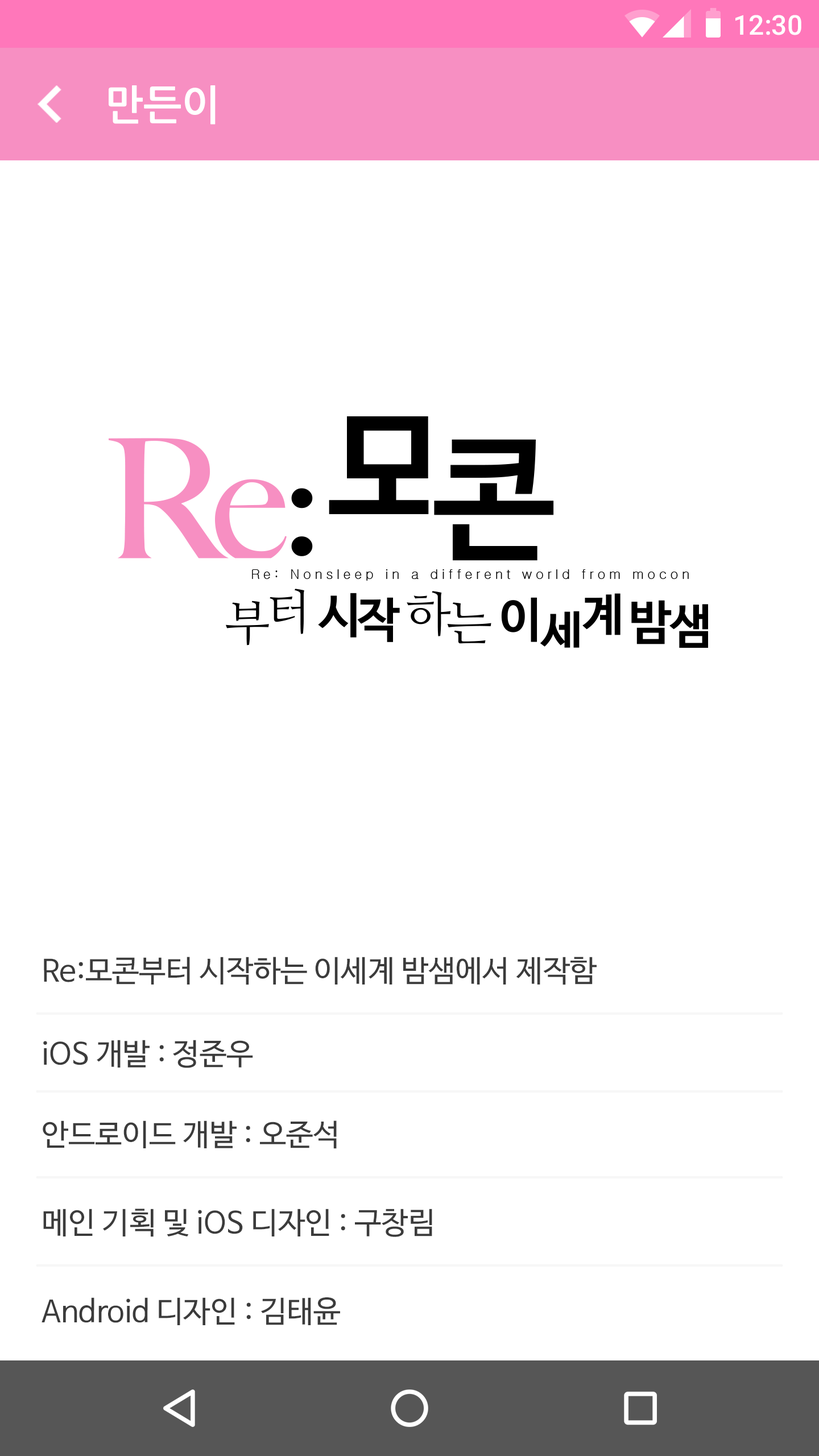
<style>
.page{position:relative;width:819px;height:1456px;background:#ffffff}
.page>*{position:absolute;margin:0}
.t1{font:27.3px "Roboto-Medium";color:#ffffff}
.t2{font:40.9px "NanumGothicBold";color:#ffffff}
.t3{font:30.2px "NanumBarunGothic";color:#3b3b3b}
</style>
<div class="page">
<p class="t1" style="left:735px;top:15px;width:66px;height:20px">12:30</p>
<p class="t2" style="left:109px;top:85px;width:107px;height:40px">만든이</p>
<p class="t3" style="left:44px;top:957px;width:553px;height:28px">Re:모콘부터 시작하는 이세계 밤샘에서 제작함</p>
<p class="t3" style="left:43px;top:1040px;width:210px;height:28px">iOS 개발 : 정준우</p>
<p class="t3" style="left:43px;top:1120px;width:294px;height:29px">안드로이드 개발 : 오준석</p>
<p class="t3" style="left:43px;top:1209px;width:389px;height:28px">메인 기획 및 iOS 디자인 : 구창림</p>
<p class="t3" style="left:42px;top:1297px;width:298px;height:28px">Android 디자인 : 김태윤</p>
</div>
